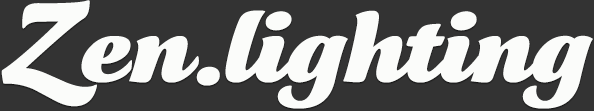
<style>
.page{position:relative;width:594px;height:111px;background:#333333}
.page>*{position:absolute;margin:0}
.t1{font:110.7px "TartineScriptBlack";color:#fbfcfa}
</style>
<div class="page">
<p class="t1" style="left:1px;top:0px;width:592px;height:109px">Zen.lighting</p>
</div>
